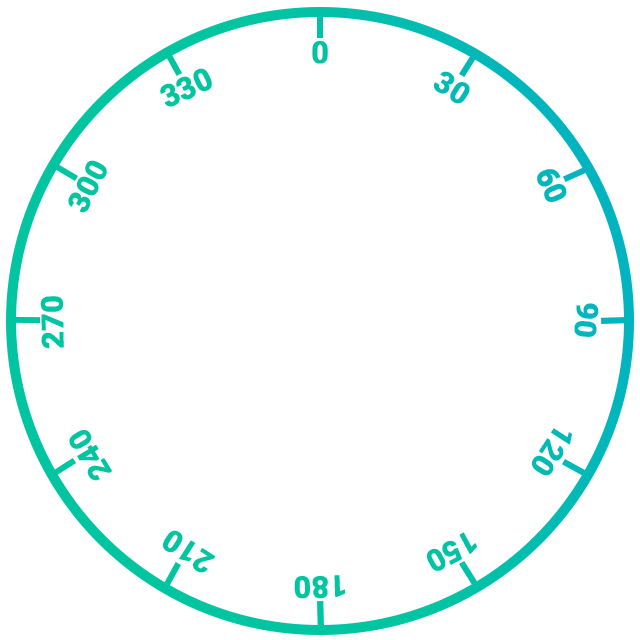
<style>
.page{position:relative;width:640px;height:640px;background:#ffffff}
.page>*{position:absolute;margin:0}
.t1{font:30px "Roboto-Bold";color:#01c2a6;font-weight:bold}
.t2{font:30px "Roboto-Bold";color:#00c5a0;font-weight:bold}
.t3{font:30px "Roboto-Bold";color:#01bab4;font-weight:bold}
.t4{font:30px "Roboto-Bold";color:#01b6bc;font-weight:bold}
.t5{font:30px "Roboto-Bold";color:#01c2a5;font-weight:bold}
</style>
<div class="page">
<p class="t1" style="left:312px;top:41px;width:16px;height:23px">0</p>
<p class="t2" style="left:160px;top:68px;width:52px;height:39px;rotate:-25deg">330</p>
<p class="t3" style="left:434px;top:71px;width:36px;height:33px;rotate:32deg">30</p>
<p class="t2" style="left:68px;top:160px;width:39px;height:53px;rotate:-62deg">300</p>
<p class="t4" style="left:537px;top:169px;width:30px;height:33px;rotate:67deg">60</p>
<p class="t2" style="left:40px;top:296px;width:24px;height:53px;rotate:-91deg">270</p>
<p class="t4" style="left:574px;top:303px;width:25px;height:34px;rotate:95deg">90</p>
<p class="t2" style="left:69px;top:430px;width:43px;height:51px;rotate:-121deg">240</p>
<p class="t3" style="left:532px;top:428px;width:40px;height:48px;rotate:123deg">120</p>
<p class="t2" style="left:163px;top:530px;width:53px;height:43px;rotate:-147deg">210</p>
<p class="t5" style="left:427px;top:532px;width:50px;height:39px;rotate:152deg">150</p>
<p class="t2" style="left:294px;top:575px;width:51px;height:24px;rotate:178deg">180</p>
</div>
